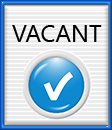
<style>
.page{position:relative;width:112px;height:130px}
.page>*{position:absolute;margin:0}
.t1{font:24px "SegoeUI";color:#010101}
</style>
<div class="page">
<p class="t1" style="left:12px;top:25px;width:90px;height:17px">VACANT</p>
</div>
